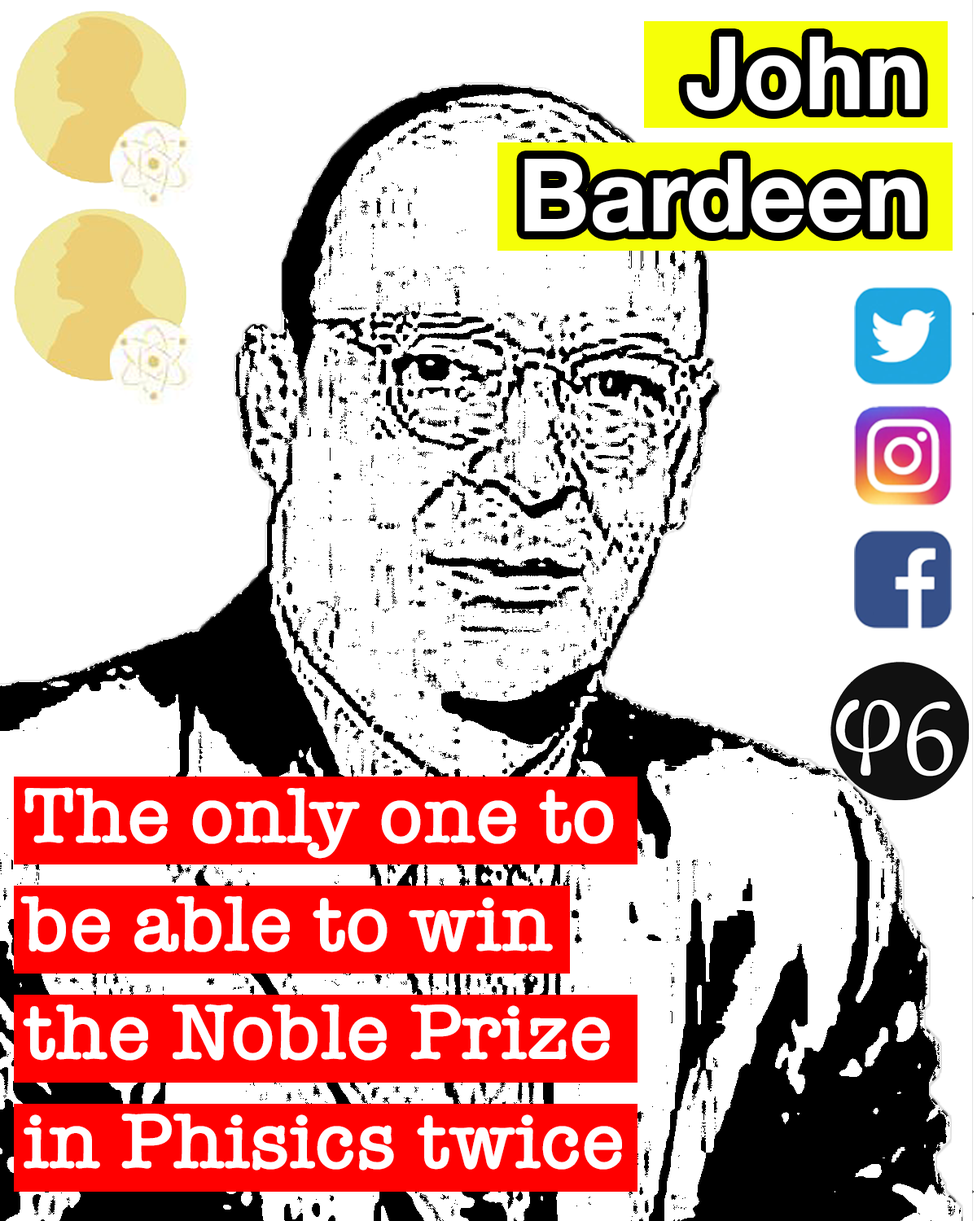
<style>
.page{position:relative;width:977px;height:1221px;background:#ffffff}
.page>*{position:absolute;margin:0}
.t1{font:101.7px "HelveticaNeue-Bold";color:#ffffff}
.t2{font:81.4px/108.5px "AmericanTypewriter-Semibold";color:#ffffff}
</style>
<div class="page">
<p class="t1" style="left:524px;top:37px;width:396px;height:196px;text-align:right">John<br> Bardeen</p>
<p class="t2" style="left:20px;top:787px;width:602px;height:383px">The only one to be able to win the Noble Prize in Phisics twice</p>
</div>
